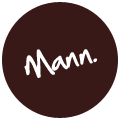
<style>
.page{position:relative;width:120px;height:120px;background:#391818}
.page>*{position:absolute;margin:0}
.t1{font:25px "HandOfSean";color:#ffffff}
</style>
<div class="page">
<p class="t1" style="left:24px;top:49px;width:73px;height:29px;rotate:-12deg">Mann.</p>
</div>
